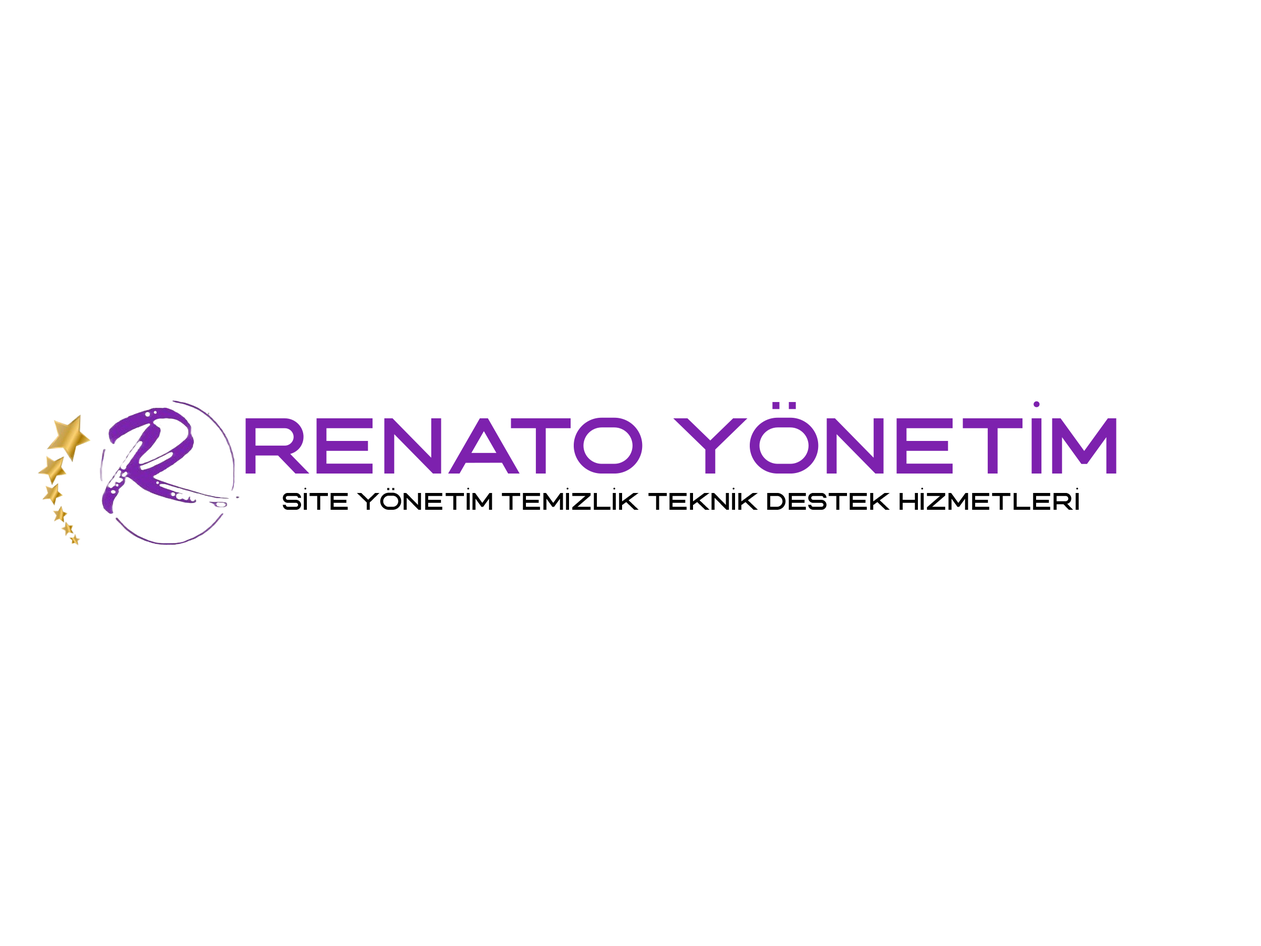
<style>
.page{position:relative;width:1261px;height:946px;background:#ffffff}
.page>*{position:absolute;margin:0}
.t1{font:78.8px "VastinePersonalUse";color:#7d21ae}
.t2{font:24.1px "VastinePersonalUse";color:#000000}
</style>
<div class="page">
<p class="t1" style="left:245px;top:401px;width:871px;height:72px">RENATO YÖNETİM</p>
<p class="t2" style="left:283px;top:488px;width:796px;height:22px">SİTE YÖNETİM TEMİZLİK TEKNİK DESTEK HİZMETLERİ</p>
</div>
